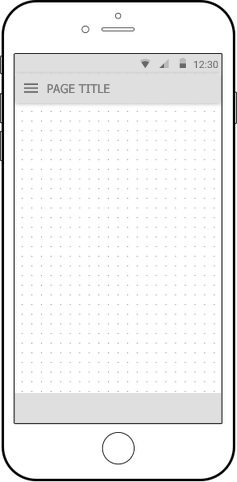
<style>
.page{position:relative;width:237px;height:482px;background:#ffffff}
.page>*{position:absolute;margin:0}
.t1{font:12px "Tahoma";color:#7f7f7f}
</style>
<div class="page">
<p class="t1" style="left:47px;top:84px;width:63px;height:10px">PAGE TITLE</p>
</div>
